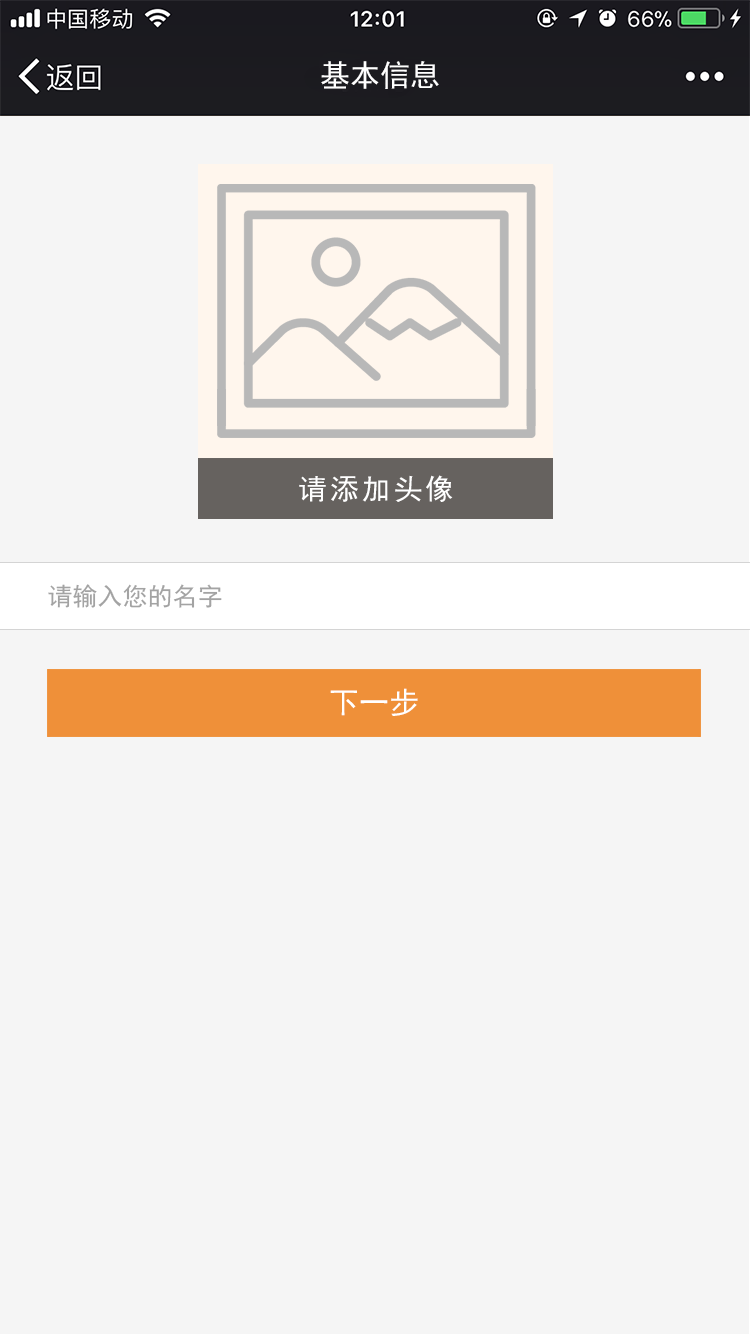
<style>
.page{position:relative;width:750px;height:1334px;background:#f5f5f5}
.page>*{position:absolute;margin:0}
.t1{font:30.5px "SimHei";color:#ffffff}
.t2{font:28.6px "SimHei";letter-spacing:0.1em;color:#ffffff}
.t3{font:25px "SimHei";color:#a3a3a3}
</style>
<div class="page">
<p class="t1" style="left:321px;top:61px;width:118px;height:28px">基本信息</p>
<p class="t2" style="left:299px;top:475px;width:154px;height:27px">请添加头像</p>
<p class="t3" style="left:48px;top:584px;width:174px;height:24px">请输入您的名字</p>
<p class="t1" style="left:330px;top:688px;width:88px;height:28px">下一步</p>
</div>
